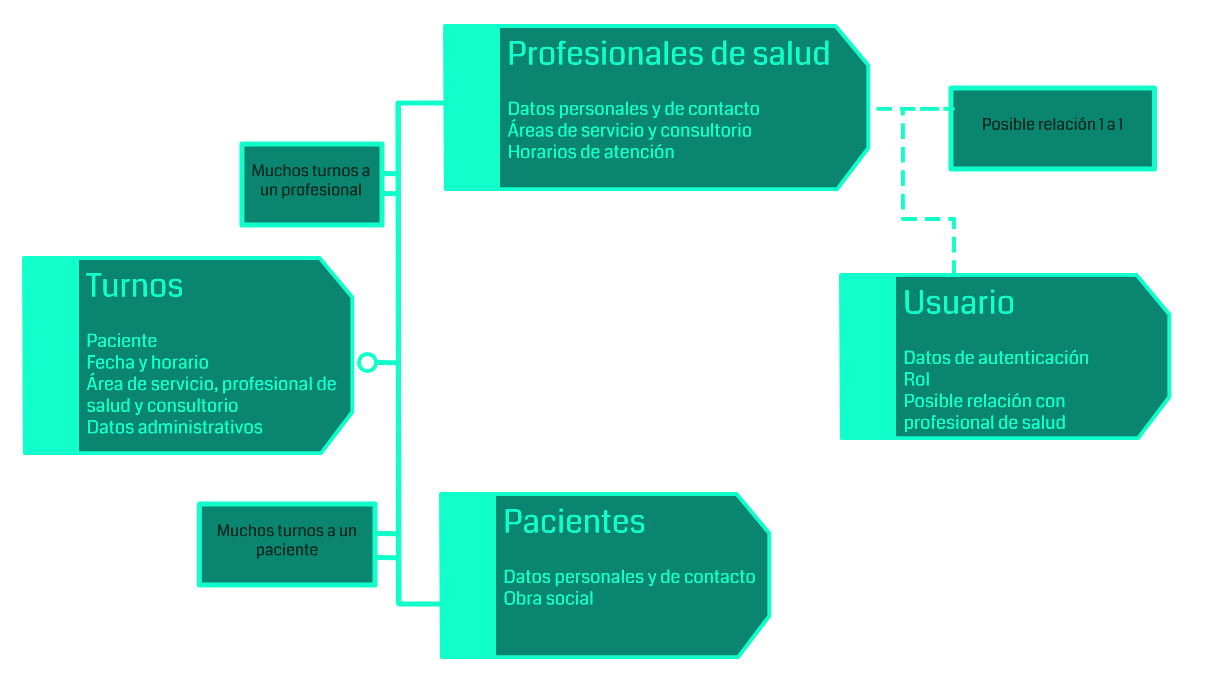
<style>
.page{position:relative;width:1206px;height:681px;background:#ffffff}
.page>*{position:absolute;margin:0}
.t1{font:18px "Coda-Regular";color:#10ffcb}
.t2{font:32px "Coda-Regular";color:#10ffcb}
.t3{font:16px "Coda-Regular";color:#002f25}
</style>
<div class="page">
<p class="t1" style="left:508px;top:40px;width:321px;height:119px"><span class="t2">Profesionales de salud<br><br></span>Datos personales y de contacto<br>Áreas de servicio y consultorio<br>Horarios de atención</p>
<p class="t3" style="left:983px;top:117px;width:139px;height:13px">Posible relación 1 a 1</p>
<p class="t3" style="left:252px;top:164px;width:118px;height:35px;text-align:center">Muchos turnos a un profesional</p>
<p class="t1" style="left:86px;top:273px;width:250px;height:161px"><span class="t2">Turnos<br><br></span>Paciente<br>Fecha y horario<br>Área de servicio, profesional de salud y consultorio<br>Datos administrativos</p>
<p class="t1" style="left:904px;top:289px;width:185px;height:144px"><span class="t2">Usuario<br><br></span>Datos de autenticación<br>Rol<br>Posible relación con profesional de salud</p>
<p class="t1" style="left:504px;top:508px;width:251px;height:97px"><span class="t2">Pacientes<br><br></span>Datos personales y de contacto<br>Obra social</p>
<p class="t3" style="left:217px;top:524px;width:139px;height:35px;text-align:center">Muchos turnos a un paciente</p>
</div>
